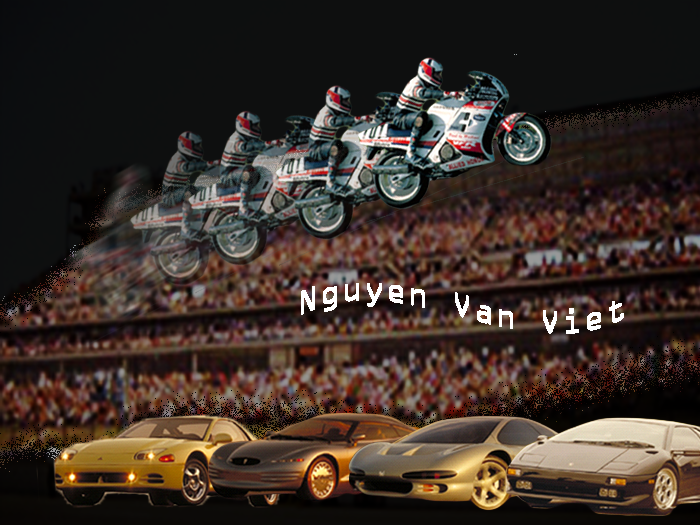
<style>
.page{position:relative;width:700px;height:525px}
.page>*{position:absolute;margin:0}
.t1{font:36px "OCRAExtended";color:#ffffff}
</style>
<div class="page">
<p class="t1" style="left:301px;top:283px;width:323px;height:51px">Nguyen Van Viet</p>
</div>
